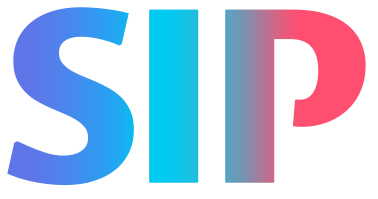
<style>
.page{position:relative;width:378px;height:199px;background:#ffffff}
.page>*{position:absolute;margin:0}
.t1{font:239.9px "ProzaLibre-ExtraBold";letter-spacing:-0.075em;font-weight:bold}
</style>
<div class="page">
<p class="t1" style="left:7px;top:7px;width:359px;height:179px">SIP</p>
</div>
